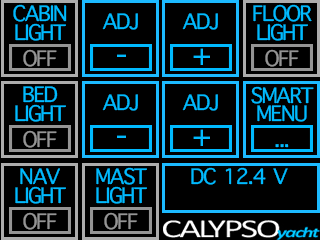
<style>
.page{position:relative;width:320px;height:240px;background:#000000}
.page>*{position:absolute;margin:0}
.t1{font:28.9px "AppleSymbols";letter-spacing:-0.05em;color:#00baff}
.t2{font:28.9px "AppleSymbols";letter-spacing:-0.05em;color:#949494}
.t3{font:42.3px "AppleSymbols";letter-spacing:-0.05em;color:#00baff}
</style>
<div class="page">
<p class="t1" style="left:13px;top:4px;width:54px;height:18px">CABIN</p>
<p class="t1" style="left:253px;top:4px;width:59px;height:18px">FLOOR</p>
<p class="t1" style="left:102px;top:13px;width:36px;height:17px">ADJ</p>
<p class="t1" style="left:182px;top:13px;width:36px;height:17px">ADJ</p>
<p class="t1" style="left:15px;top:23px;width:51px;height:18px">LIGHT</p>
<p class="t1" style="left:257px;top:23px;width:51px;height:18px">LIGHT</p>
<p class="t2" style="left:23px;top:49px;width:34px;height:18px">OFF</p>
<p class="t3" style="left:117px;top:54px;width:9px;height:3px">-</p>
<p class="t3" style="left:193px;top:48px;width:17px;height:17px">+</p>
<p class="t2" style="left:265px;top:49px;width:34px;height:18px">OFF</p>
<p class="t1" style="left:23px;top:86px;width:35px;height:17px">BED</p>
<p class="t1" style="left:251px;top:86px;width:63px;height:18px">SMART</p>
<p class="t1" style="left:102px;top:94px;width:36px;height:17px">ADJ</p>
<p class="t1" style="left:182px;top:94px;width:36px;height:17px">ADJ</p>
<p class="t1" style="left:15px;top:104px;width:51px;height:18px">LIGHT</p>
<p class="t1" style="left:257px;top:105px;width:50px;height:17px">MENU</p>
<p class="t2" style="left:23px;top:130px;width:34px;height:18px">OFF</p>
<p class="t3" style="left:117px;top:135px;width:9px;height:3px">-</p>
<p class="t3" style="left:193px;top:129px;width:17px;height:17px">+</p>
<p class="t1" style="left:275px;top:144px;width:14px;height:4px">...</p>
<p class="t1" style="left:20px;top:168px;width:40px;height:17px">NAV</p>
<p class="t1" style="left:96px;top:167px;width:51px;height:18px">MAST</p>
<p class="t1" style="left:191px;top:167px;width:97px;height:18px">DC 12.4 V</p>
<p class="t1" style="left:15px;top:186px;width:51px;height:18px">LIGHT</p>
<p class="t1" style="left:96px;top:186px;width:51px;height:18px">LIGHT</p>
<p class="t2" style="left:23px;top:212px;width:34px;height:18px">OFF</p>
<p class="t2" style="left:104px;top:212px;width:34px;height:18px">OFF</p>
</div>
